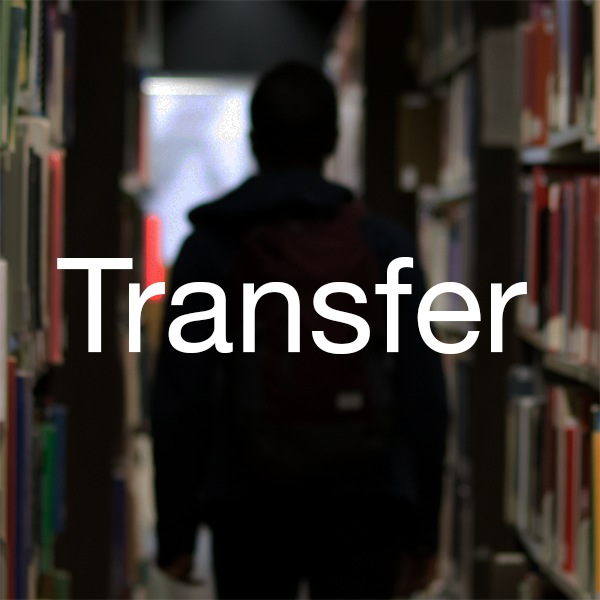
<style>
.page{position:relative;width:600px;height:600px}
.page>*{position:absolute;margin:0}
.t1{font:131.5px "HelveticaNeue";color:#ffffff}
</style>
<div class="page">
<p class="t1" style="left:57px;top:257px;width:470px;height:97px">Transfer</p>
</div>
